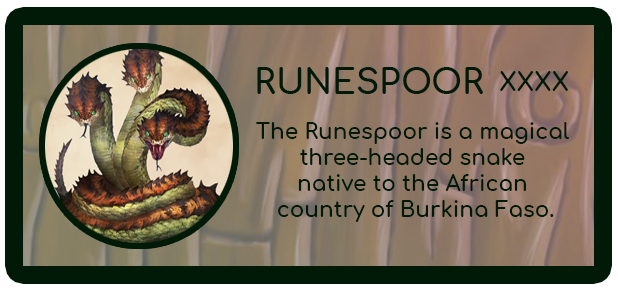
<style>
.page{position:relative;width:618px;height:291px}
.page>*{position:absolute;margin:0}
.t1{font:33.9px "Comfortaa-Bold";color:#011a08}
.t2{font:24.5px "Comfortaa-Bold";color:#011a08}
.t3{font:21.6px "Comfortaa-Bold";color:#011a08}
</style>
<div class="page">
<p class="t1" style="left:257px;top:67px;width:226px;height:27px">RUNESPOOR</p>
<p class="t2" style="left:500px;top:71px;width:68px;height:20px">XXXX</p>
<p class="t3" style="left:256px;top:122px;width:313px;height:100px;text-align:center">The Runespoor is a magical <br>three-headed snake <br>native to the African <br>country of Burkina Faso.</p>
</div>
